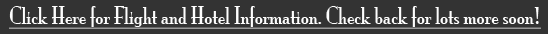
<style>
.page{position:relative;width:548px;height:34px;background:#333333}
.page>*{position:absolute;margin:0}
.t1{font:22px "MonaLisaSolidITCTT";color:#fefefe;text-decoration:underline}
</style>
<div class="page">
<p class="t1" style="left:9px;top:6px;width:532px;height:23px">Click Here for Flight and Hotel Information. Check back for lots more soon!</p>
</div>
